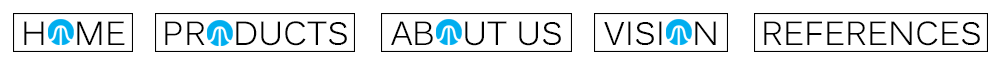
<style>
.page{position:relative;width:1000px;height:66px;background:#ffffff}
.page>*{position:absolute;margin:0}
.t1{font:33.3px "Kalinga";color:#000000}
</style>
<div class="page">
<p class="t1" style="left:24px;top:21px;width:101px;height:24px">H   ME</p>
<p class="t1" style="left:165px;top:21px;width:182px;height:25px">PR   DUCTS</p>
<p class="t1" style="left:391px;top:21px;width:170px;height:25px">AB   UT US</p>
<p class="t1" style="left:604px;top:21px;width:112px;height:24px">VISI   N</p>
<p class="t1" style="left:764px;top:21px;width:216px;height:25px">REFERENCES</p>
</div>
